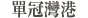
<style>
.page{position:relative;width:88px;height:18px;background:#ffffff}
.page>*{position:absolute;margin:0}
.t1{font:18px "RyuminPro-ExBold";color:#4c4843;scale:0.9 1}
</style>
<div class="page">
<p class="t1" style="left:12px;top:0px;width:64px;height:18px">單冠灣港</p>
</div>
